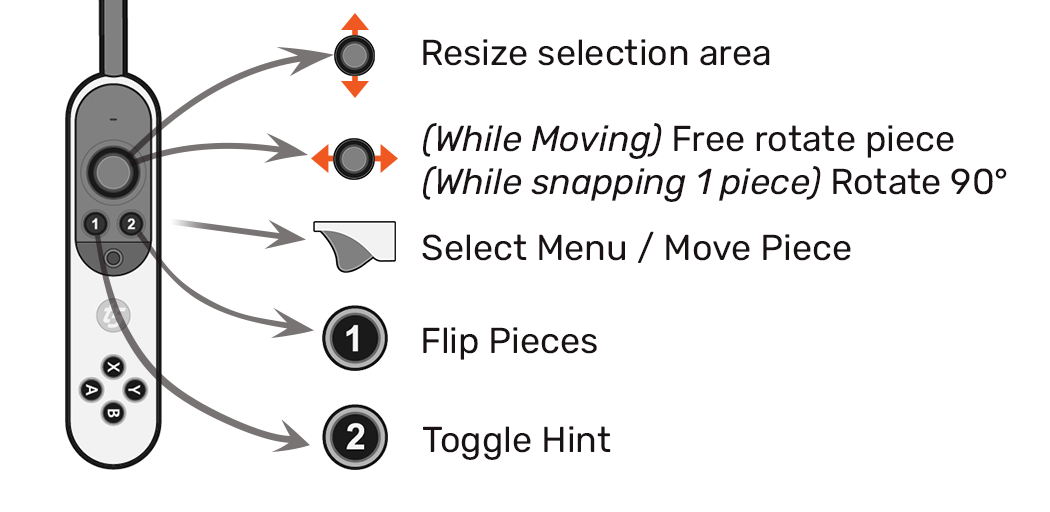
<style>
.page{position:relative;width:1050px;height:512px;background:#ffffff}
.page>*{position:absolute;margin:0}
.t1{font:36px "Rubik-Regular";color:#191213}
.t2{font:36px "Rubik-Italic";color:#191213}
</style>
<div class="page">
<p class="t1" style="left:423px;top:39px;width:347px;height:27px">Resize selection area</p>
<p class="t2" style="left:423px;top:123px;width:584px;height:79px">(While Moving)<span class="t1"> Free rotate piece<br></span>(While snapping 1 piece)<span class="t1"> Rotate 90°</span></p>
<p class="t1" style="left:422px;top:231px;width:429px;height:32px">Select Menu / Move Piece</p>
<p class="t1" style="left:423px;top:327px;width:174px;height:33px">Flip Pieces</p>
<p class="t1" style="left:423px;top:426px;width:188px;height:34px">Toggle Hint</p>
</div>
